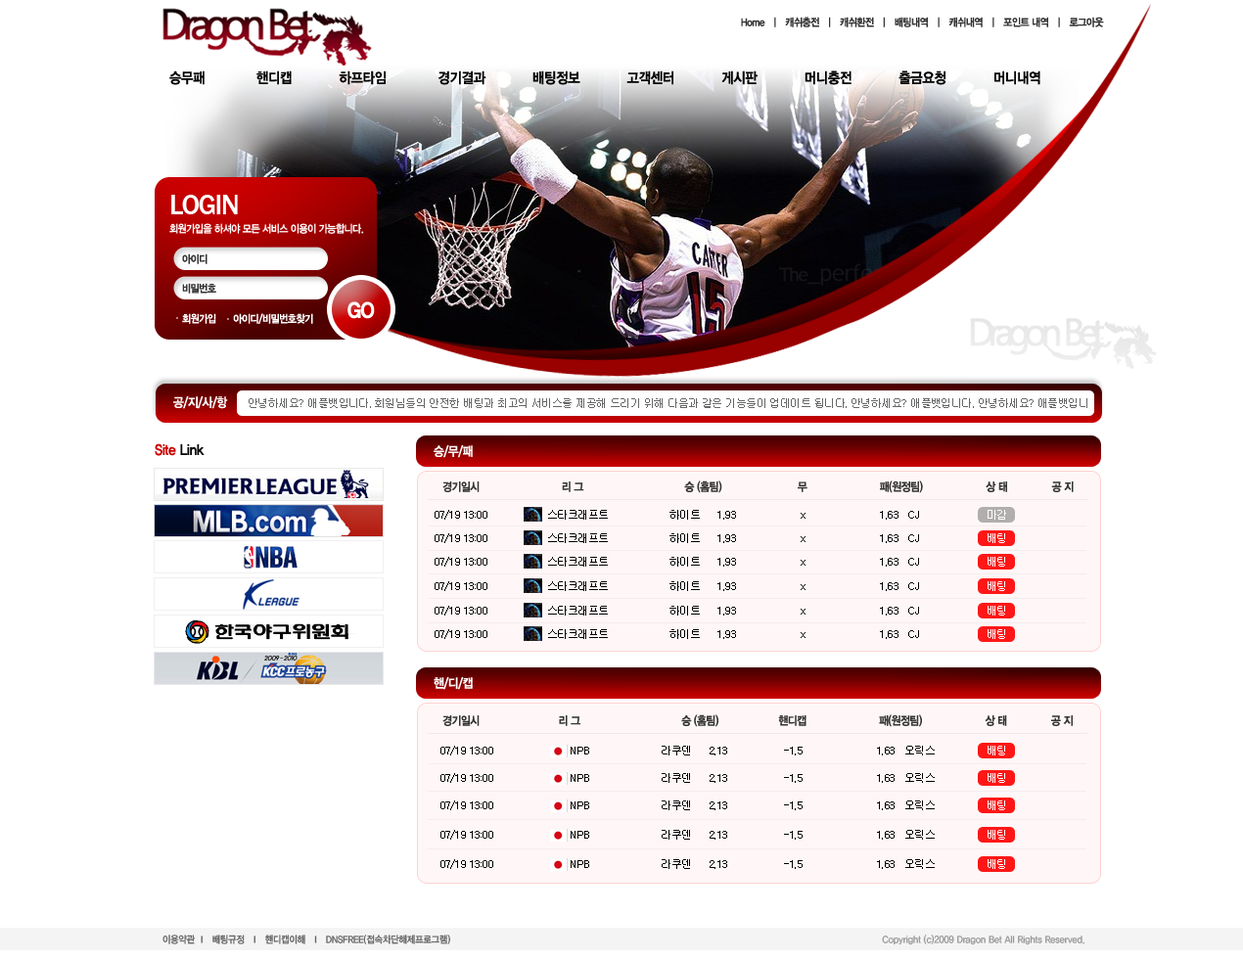
<style>
.page{position:relative;width:1243px;height:959px;background:#ffffff}
.page>*{position:absolute;margin:0}
.t1{font:10.8px "YDIYGO340";letter-spacing:-0.05em;color:#333333;scale:0.9 1}
.t2{font:14.7px "YDIYGO340";letter-spacing:-0.025em;color:#000000;scale:0.9 1}
.t3{font:28.2px "FranklinGothic-Medium";letter-spacing:-0.05em;color:#ffffff}
.t4{font:10.8px "YDIYGO340";letter-spacing:-0.05em;color:#ffffff;scale:0.9 1}
.t5{font:10.8px/29.4px "YDIYGO340";letter-spacing:-0.05em;color:#333333;scale:0.9 1}
.t6{font:21px "YDIYGO360";letter-spacing:-0.05em;color:#ffffff;scale:0.9 1}
.t7{font:12.7px "YDIYGO340";letter-spacing:-0.05em;color:#ffffff;scale:0.9 1}
.t8{font:10.8px "Gulim";letter-spacing:-0.05em;color:#666666}
.t9{font:14.7px "YDIYGO340";letter-spacing:-0.025em;color:#cc0000;scale:0.9 1}
.t10{font:11.7px "YDIYGO340";letter-spacing:-0.05em;color:#333333;scale:0.9 1}
.t11{font:10.8px "Gulim";letter-spacing:-0.05em;color:#000000}
.t12{font:10.8px "Gulim";letter-spacing:-0.05em;color:#ffffff}
.t13{font:9.8px "YDIYGO330";color:#666666;scale:0.9 1}
.t14{font:9.8px "YDIYGO330";color:#999999;scale:0.9 1}
</style>
<div class="page">
<p class="t1" style="left:741px;top:17px;width:363px;height:10px">Home  ㅣ  캐쉬충전  ㅣ  캐쉬환전  ㅣ  배팅내역  ㅣ  캐쉬내역  ㅣ  포인트 내역  ㅣ  로그아웃</p>
<p class="t2" style="left:169px;top:70px;width:871px;height:15px">승무패            핸디캡           하프타임            경기결과           배팅정보           고객센터           게시판           머니충전           출금요청           머니내역</p>
<p class="t3" style="left:171px;top:195px;width:67px;height:19px">LOGIN</p>
<p class="t4" style="left:169px;top:223px;width:195px;height:11px">회원가입을 하셔야 모든 서비스 이용이 가능합니다.</p>
<p class="t5" style="left:182px;top:254px;width:34px;height:40px">아이디<br>비밀번호</p>
<p class="t6" style="left:347px;top:301px;width:28px;height:18px">GO</p>
<p class="t4" style="left:182px;top:313px;width:131px;height:11px">회원가입      아이디/비밀번호찾기</p>
<p class="t7" style="left:173px;top:396px;width:55px;height:13px">공/지/사/항</p>
<p class="t8" style="left:249px;top:398px;width:838px;height:10px">안녕하세요? 애플뱃입니다. 회원님들의 안전한 배팅과 최고의 서비스를 제공해 드리기 위해 다음과 같은 기능들이 업데이트 됩니다. 안녕하세요? 애플뱃입니다. 안녕하세요? 애플뱃입니</p>
<p class="t9" style="left:155px;top:443px;width:50px;height:13px">Site <span class="t2">Link</span></p>
<p class="t7" style="left:434px;top:445px;width:39px;height:13px">승/무/패</p>
<p class="t10" style="left:442px;top:481px;width:632px;height:12px">경기일시                          리 그                                승 (홈팀)                        무                       패(원정팀)                    상 태              공 지</p>
<p class="t11" style="left:435px;top:510px;width:484px;height:10px">07/19 13:00                  스타크래프트                  하이트     1.93                   x                      1.63   CJ</p>
<p class="t12" style="left:988px;top:510px;width:18px;height:10px">마감</p>
<p class="t11" style="left:435px;top:533px;width:484px;height:10px">07/19 13:00                  스타크래프트                  하이트     1.93                   x                      1.63   CJ</p>
<p class="t12" style="left:988px;top:533px;width:17px;height:10px">배팅</p>
<p class="t11" style="left:435px;top:557px;width:484px;height:10px">07/19 13:00                  스타크래프트                  하이트     1.93                   x                      1.63   CJ</p>
<p class="t12" style="left:988px;top:557px;width:17px;height:10px">배팅</p>
<p class="t11" style="left:435px;top:581px;width:484px;height:10px">07/19 13:00                  스타크래프트                  하이트     1.93                   x                      1.63   CJ</p>
<p class="t12" style="left:988px;top:581px;width:17px;height:10px">배팅</p>
<p class="t11" style="left:435px;top:606px;width:484px;height:10px">07/19 13:00                  스타크래프트                  하이트     1.93                   x                      1.63   CJ</p>
<p class="t12" style="left:988px;top:606px;width:17px;height:10px">배팅</p>
<p class="t11" style="left:435px;top:629px;width:484px;height:10px">07/19 13:00                  스타크래프트                  하이트     1.93                   x                      1.63   CJ</p>
<p class="t12" style="left:988px;top:629px;width:17px;height:10px">배팅</p>
<p class="t7" style="left:434px;top:677px;width:39px;height:13px">핸/디/캡</p>
<p class="t10" style="left:442px;top:715px;width:631px;height:12px">경기일시                         리 그                                승 (홈팀)                   핸디캡                       패(원정팀)                    상 태              공 지</p>
<p class="t11" style="left:440px;top:746px;width:495px;height:10px">07/19 13:00                       NPB                     라쿠덴     2.13                 -1.5                      1.63   오릭스</p>
<p class="t12" style="left:988px;top:746px;width:17px;height:10px">배팅</p>
<p class="t11" style="left:440px;top:773px;width:495px;height:10px">07/19 13:00                       NPB                     라쿠덴     2.13                 -1.5                      1.63   오릭스</p>
<p class="t12" style="left:988px;top:773px;width:17px;height:10px">배팅</p>
<p class="t11" style="left:440px;top:801px;width:495px;height:9px">07/19 13:00                       NPB                     라쿠덴     2.13                 -1.5                      1.63   오릭스</p>
<p class="t12" style="left:988px;top:801px;width:17px;height:9px">배팅</p>
<p class="t11" style="left:440px;top:830px;width:495px;height:10px">07/19 13:00                       NPB                     라쿠덴     2.13                 -1.5                      1.63   오릭스</p>
<p class="t12" style="left:988px;top:830px;width:17px;height:10px">배팅</p>
<p class="t11" style="left:440px;top:859px;width:495px;height:10px">07/19 13:00                       NPB                     라쿠덴     2.13                 -1.5                      1.63   오릭스</p>
<p class="t12" style="left:988px;top:859px;width:17px;height:10px">배팅</p>
<p class="t13" style="left:162px;top:935px;width:288px;height:10px">이용약관  l   배팅규정   l   핸디캡이해   l   DNSFREE(접속차단해제프로그램)</p>
<p class="t14" style="left:882px;top:935px;width:203px;height:11px">Copyright (c)2009 Dragon Bet All Rights Reserved.</p>
</div>
